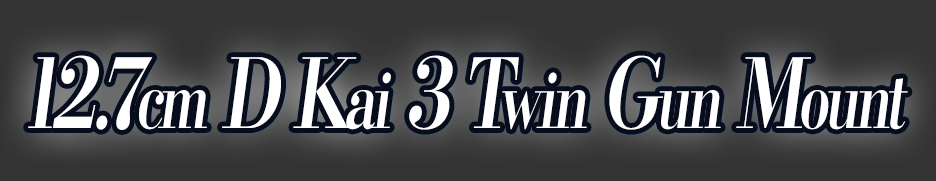
<style>
.page{position:relative;width:936px;height:181px;background:#333333}
.page>*{position:absolute;margin:0}
.t1{font:96px "KochoStd-Heavy";letter-spacing:-0.08em;color:#ffffff;font-style:italic;scale:0.75 1}
.t2{font:76.8px "KochoStd-Heavy";letter-spacing:-0.08em;color:#ffffff;font-style:italic;scale:0.75 1}
</style>
<div class="page">
<p class="t1" style="left:28px;top:55px;width:880px;height:75px">12.7<span class="t2">cm</span> D K<span class="t2">ai</span> 3 T<span class="t2">win</span> G<span class="t2">un</span> M<span class="t2">ount</span></p>
</div>
